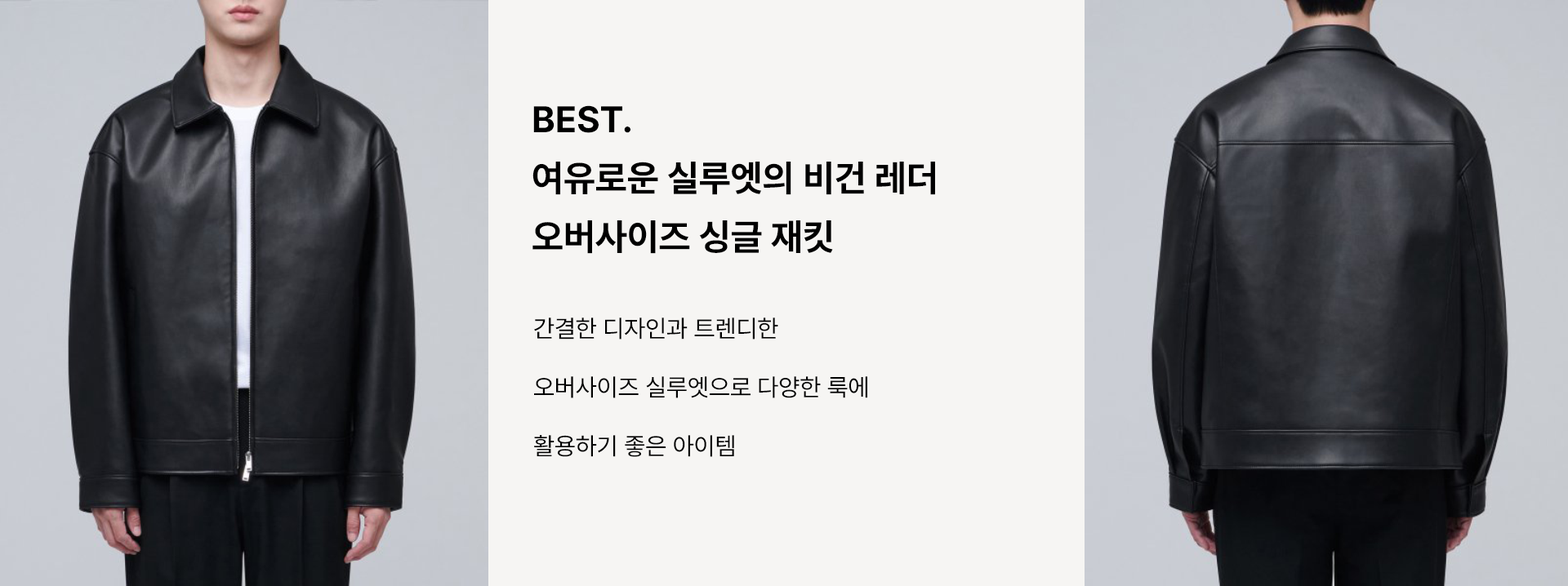
<style>
.page{position:relative;width:1568px;height:586px;background:#f6f5f3}
.page>*{position:absolute;margin:0}
.t1{font:36.8px/58.8px "Pretendard-Bold";color:#000000}
.t2{font:24.5px/58.8px "Pretendard-Regular";color:#000000}
</style>
<div class="page">
<p class="t1" style="left:532px;top:105px;width:403px;height:149px">BEST. <br>여유로운 실루엣의 비건 레더 <br>오버사이즈 싱글 재킷</p>
<p class="t2" style="left:534px;top:318px;width:333px;height:139px">간결한 디자인과 트렌디한 <br>오버사이즈 실루엣으로 다양한 룩에 <br>활용하기 좋은 아이템</p>
</div>
